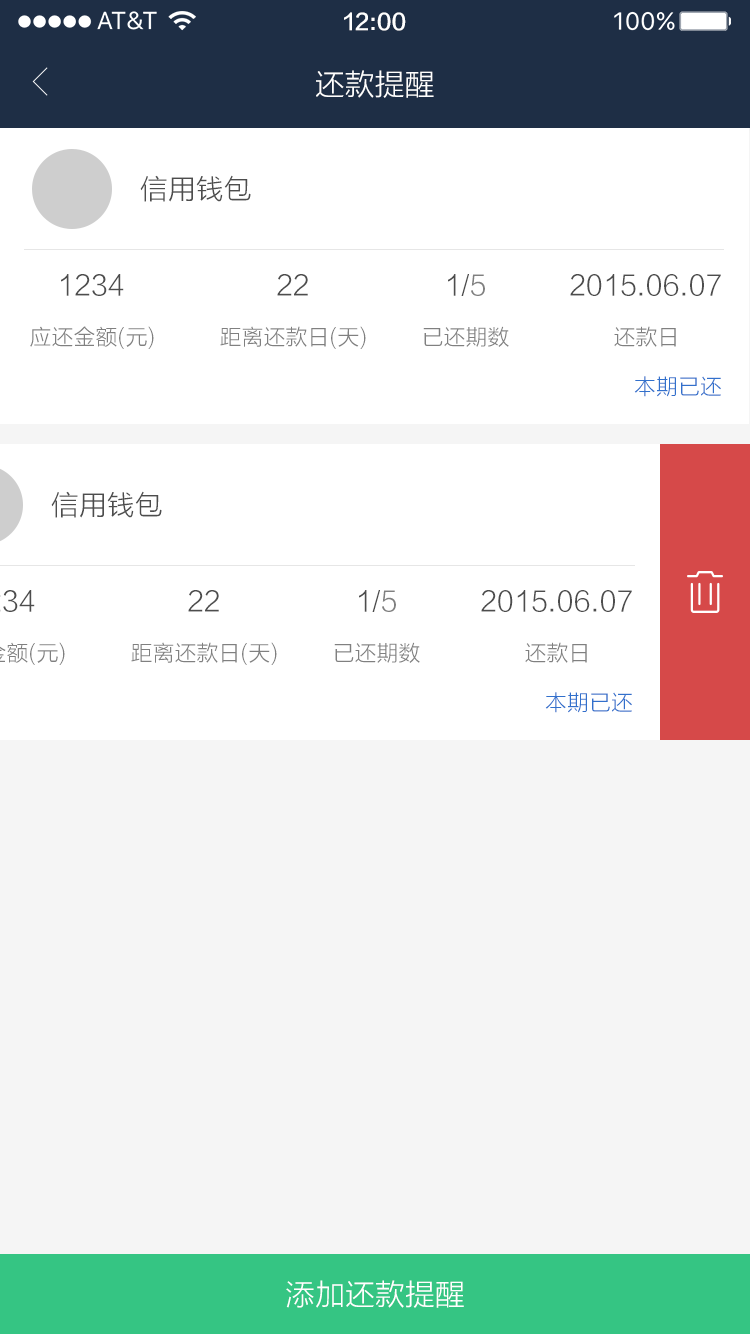
<style>
.page{position:relative;width:750px;height:1334px;background:#ffffff}
.page>*{position:absolute;margin:0}
.t1{font:22px "FZLTZHK--GBK1-0";color:#ffffff}
.t2{font:30px "FZLTXHK";color:#ffffff}
.t3{font:28px "FZLTXHK";color:#4d4d4d}
.t4{font:28px "FZLTXHK";color:#808080}
.t5{font:22px "FZLTXHK";color:#808080}
.t6{font:22px "FZLTXHK";color:#3170cc}
</style>
<div class="page">
<p class="t1" style="left:344px;top:12px;width:62px;height:19px">12:00</p>
<p class="t2" style="left:316px;top:70px;width:118px;height:28px">还款提醒</p>
<p class="t3" style="left:140px;top:175px;width:111px;height:27px">信用钱包</p>
<p class="t3" style="left:61px;top:274px;width:63px;height:22px">1234</p>
<p class="t3" style="left:277px;top:274px;width:31px;height:22px">22</p>
<p class="t3" style="left:448px;top:274px;width:37px;height:22px">1/<span class="t4">5</span></p>
<p class="t3" style="left:570px;top:274px;width:151px;height:22px">2015.06.07</p>
<p class="t5" style="left:30px;top:326px;width:124px;height:23px">应还金额(元)</p>
<p class="t5" style="left:220px;top:326px;width:146px;height:23px">距离还款日(天)</p>
<p class="t5" style="left:423px;top:326px;width:86px;height:21px">已还期数</p>
<p class="t5" style="left:614px;top:326px;width:62px;height:21px">还款日</p>
<p class="t6" style="left:634px;top:376px;width:87px;height:21px">本期已还</p>
<p class="t3" style="left:51px;top:491px;width:111px;height:27px">信用钱包</p>
<p class="t3" style="left:188px;top:590px;width:31px;height:22px">22</p>
<p class="t3" style="left:359px;top:590px;width:37px;height:22px">1/<span class="t4">5</span></p>
<p class="t3" style="left:481px;top:590px;width:151px;height:22px">2015.06.07</p>
<p class="t5" style="left:131px;top:642px;width:146px;height:23px">距离还款日(天)</p>
<p class="t5" style="left:334px;top:642px;width:86px;height:21px">已还期数</p>
<p class="t5" style="left:525px;top:642px;width:62px;height:21px">还款日</p>
<p class="t6" style="left:545px;top:692px;width:87px;height:21px">本期已还</p>
<p class="t2" style="left:286px;top:1280px;width:178px;height:28px">添加还款提醒</p>
</div>
